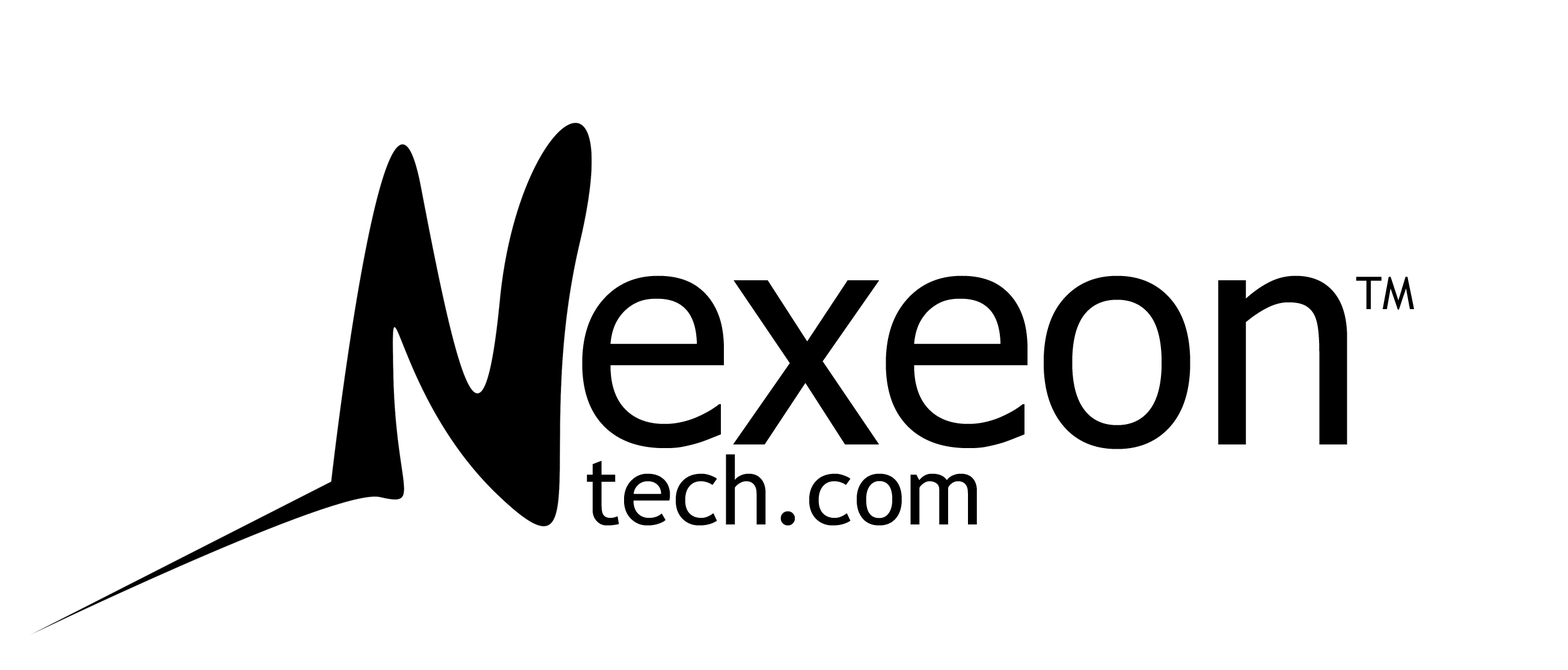
<style>
.page{position:relative;width:1568px;height:670px;background:#ffffff}
.page>*{position:absolute;margin:0}
.t1{font:300.6px "Tahoma";color:#000000}
.t2{font:45.1px "TrebuchetMS";color:#000000}
.t3{font:95px "TrebuchetMS";color:#000000}
</style>
<div class="page">
<p class="t1" style="left:582px;top:275px;width:765px;height:174px">exeon</p>
<p class="t2" style="left:1356px;top:277px;width:58px;height:33px">TM</p>
<p class="t3" style="left:587px;top:454px;width:390px;height:71px">tech.com</p>
</div>
